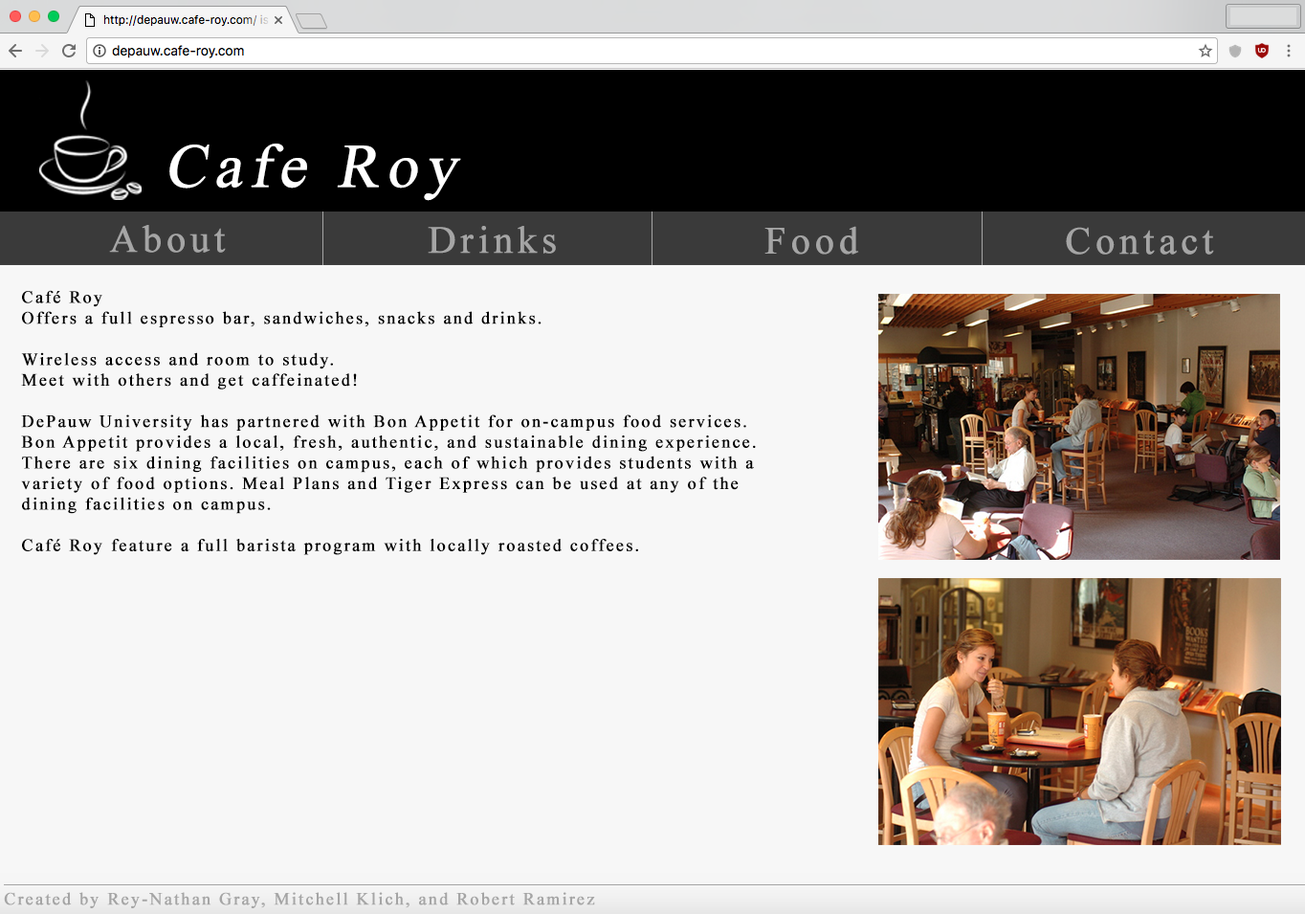
<style>
.page{position:relative;width:1305px;height:914px;background:#f7f7f7}
.page>*{position:absolute;margin:0}
.t1{font:61.7px "TimesNewRomanPSMT";letter-spacing:0.1em;color:#ffffff;font-weight:bold;font-style:italic}
.t2{font:38.3px "TimesNewRomanPSMT";letter-spacing:0.1em;color:#a5a5a5;font-weight:bold}
.t3{font:17.2px "TimesNewRomanPSMT";letter-spacing:0.1em;color:#000000;font-weight:bold}
.t4{font:17.2px "TimesNewRomanPSMT";letter-spacing:0.1em;color:#a5a5a5;font-weight:bold}
</style>
<div class="page">
<p class="t1" style="left:169px;top:144px;width:292px;height:57px">Cafe Roy</p>
<p class="t2" style="left:109px;top:225px;width:117px;height:28px">About</p>
<p class="t2" style="left:428px;top:226px;width:128px;height:28px">Drinks</p>
<p class="t2" style="left:764px;top:226px;width:95px;height:29px">Food</p>
<p class="t2" style="left:1066px;top:227px;width:148px;height:28px">Contact</p>
<p class="t3" style="left:21px;top:290px;width:735px;height:265px">Café Roy<br>Offers a full espresso bar, sandwiches, snacks and drinks.<br><br>Wireless access and room to study. <br>Meet with others and get caffeinated!<br><br>DePauw University has partnered with Bon Appetit for on-campus food services. <br>Bon Appetit provides a local, fresh, authentic, and sustainable dining experience. <br>There are six dining facilities on campus, each of which provides students with a <br>variety of food options. Meal Plans and Tiger Express can be used at any of the <br>dining facilities on campus.<br><br>Café Roy feature a full barista program with locally roasted coffees.</p>
<p class="t4" style="left:4px;top:892px;width:591px;height:16px">Created by Rey-Nathan Gray, Mitchell Klich, and Robert Ramirez</p>
</div>
